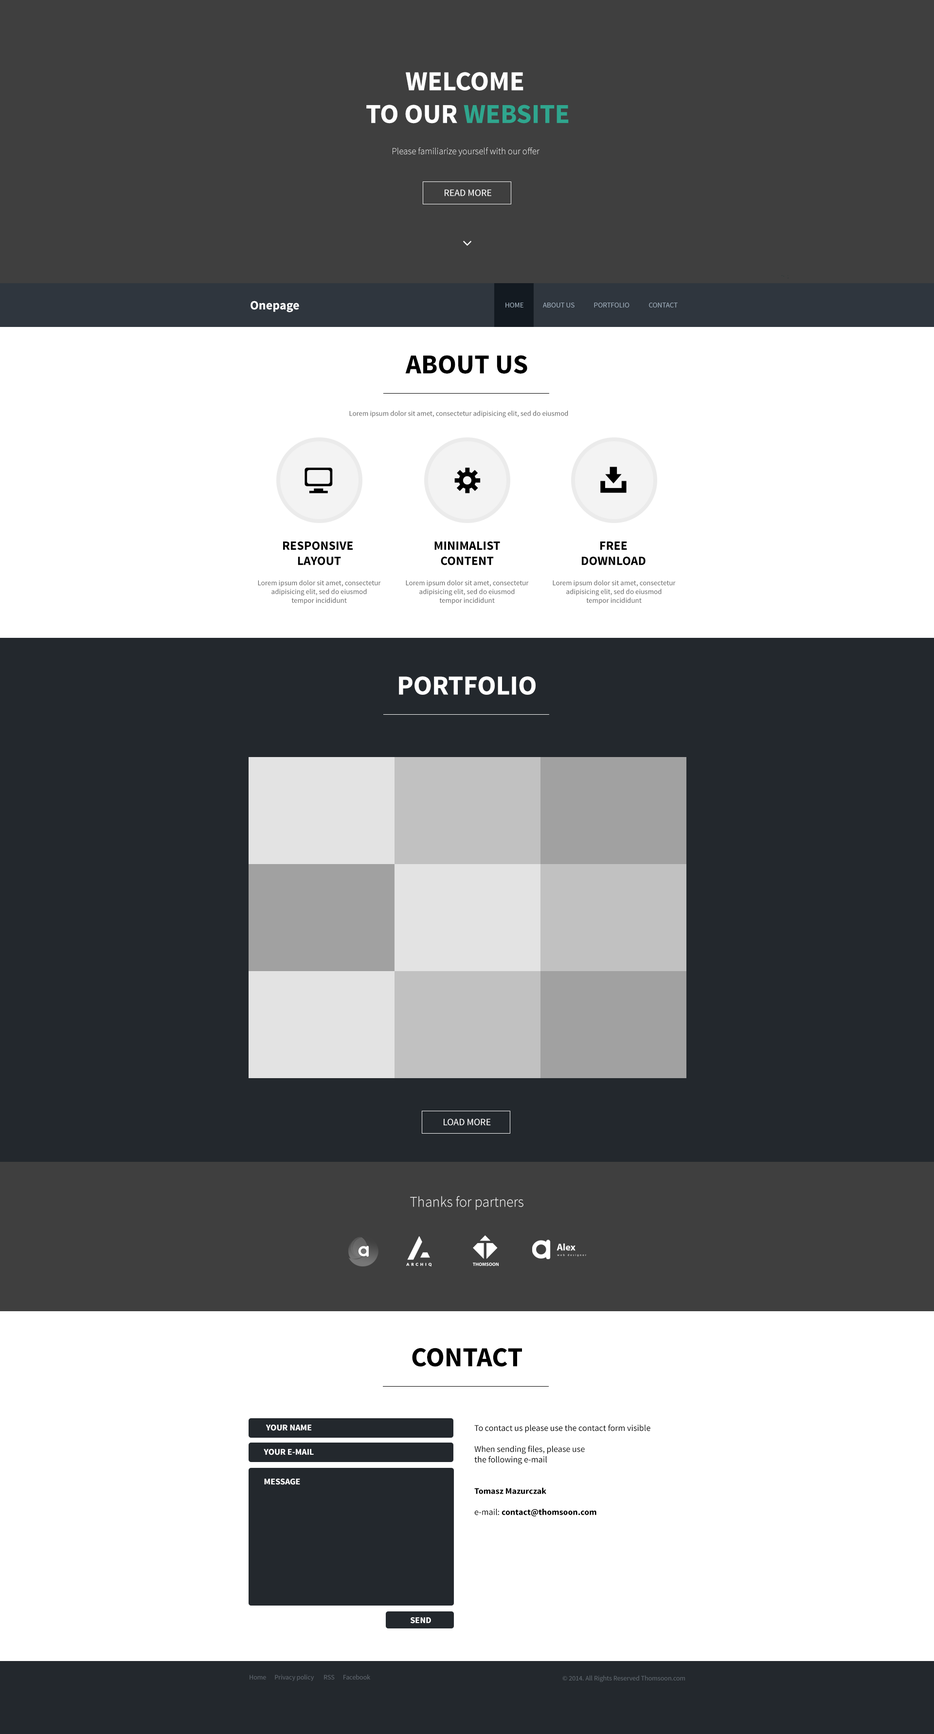
<style>
.page{position:relative;width:934px;height:1734px;background:#ffffff}
.page>*{position:absolute;margin:0}
.t1{font:27.2px "SourceSansPro-Bold";color:#ffffff;text-transform:uppercase}
.t2{font:27.2px "SourceSansPro-Bold";color:#2fa68e;text-transform:uppercase}
.t3{font:9.2px "SourceSansPro-Light";color:#ffffff}
.t4{font:9.7px "SourceSansPro-Regular";color:#ffffff}
.t5{font:12.6px "SourceSansPro-Bold";color:#ffffff}
.t6{font:7.3px "SourceSansPro-Regular";color:#a3b2c0}
.t7{font:27.2px "SourceSansPro-Bold";color:#000000;text-transform:uppercase}
.t8{font:7.3px "SourceSansPro-Regular";color:#606060}
.t9{font:12.6px "SourceSansPro-Bold";color:#000000}
.t10{font:14.8px "SourceSansPro-Light";color:#ffffff}
.t11{font:27.4px "SourceSansPro-Bold";color:#000000;text-transform:uppercase}
.t12{font:8.8px "SourceSansPro-Bold";color:#ffffff;text-transform:uppercase}
.t13{font:8.8px "SourceSansPro-Regular";color:#000000}
.t14{font:8.8px "SourceSansPro-Bold";color:#000000}
.t15{font:6.8px "SourceSansPro-Regular";color:#5f666e}
.t16{font:6.8px "SourceSansPro-Regular";color:#5f676e}
</style>
<div class="page">
<p class="t1" style="left:366px;top:72px;width:203px;height:52px;text-align:center">Welcome <br>to our <span class="t2">website</span></p>
<p class="t3" style="left:393px;top:147px;width:147px;height:9px">Please familiarize yourself with our offer</p>
<p class="t4" style="left:445px;top:189px;width:46px;height:7px">READ MORE</p>
<p class="t5" style="left:251px;top:301px;width:48px;height:11px">Onepage</p>
<p class="t6" style="left:505px;top:303px;width:173px;height:4px">HOME             ABOUT US             PORTFOLIO             CONTACT</p>
<p class="t7" style="left:405px;top:355px;width:122px;height:19px">ABOUT US</p>
<p class="t8" style="left:349px;top:411px;width:219px;height:6px">Lorem ipsum dolor sit amet, consectetur adipisicing elit, sed do eiusmod</p>
<p class="t9" style="left:283px;top:541px;width:70px;height:24px;text-align:center">RESPONSIVE <br>LAYOUT</p>
<p class="t9" style="left:434px;top:541px;width:66px;height:24px;text-align:center">MINIMALIST<br>CONTENT</p>
<p class="t9" style="left:582px;top:541px;width:64px;height:24px;text-align:center">FREE<br>DOWNLOAD</p>
<p class="t8" style="left:258px;top:580px;width:123px;height:24px;text-align:center">Lorem ipsum dolor sit amet, consectetur<br> adipisicing elit, sed do eiusmod <br>tempor incididunt</p>
<p class="t8" style="left:406px;top:580px;width:123px;height:24px;text-align:center">Lorem ipsum dolor sit amet, consectetur<br> adipisicing elit, sed do eiusmod <br>tempor incididunt</p>
<p class="t8" style="left:553px;top:580px;width:123px;height:24px;text-align:center">Lorem ipsum dolor sit amet, consectetur<br> adipisicing elit, sed do eiusmod <br>tempor incididunt</p>
<p class="t1" style="left:399px;top:676px;width:137px;height:19px">PORTFOLIO</p>
<p class="t4" style="left:444px;top:1118px;width:47px;height:7px">LOAD MORE</p>
<p class="t10" style="left:410px;top:1196px;width:113px;height:14px">Thanks for partners</p>
<p class="t11" style="left:412px;top:1348px;width:110px;height:19px">CONTACT</p>
<p class="t12" style="left:266px;top:1424px;width:45px;height:7px">YOUR NAME</p>
<p class="t13" style="left:474px;top:1424px;width:176px;height:92px">To contact us please use the contact form visible<br><br>When sending files, please use<br>the following e-mail<br><br><br><span class="t14">Tomasz Mazurczak<br><br></span>e-mail:<span class="t14"> contact@thomsoon.com</span></p>
<p class="t12" style="left:264px;top:1449px;width:50px;height:6px">YOUR E-MAIL</p>
<p class="t12" style="left:264px;top:1478px;width:36px;height:7px">MESSAGE</p>
<p class="t12" style="left:410px;top:1617px;width:21px;height:6px">SEND</p>
<p class="t15" style="left:250px;top:1674px;width:120px;height:7px">Home      Privacy policy       RSS      Facebook</p>
<p class="t16" style="left:562px;top:1675px;width:123px;height:7px">© 2014. All Rights Reserved Thomsoon.com</p>
</div>
